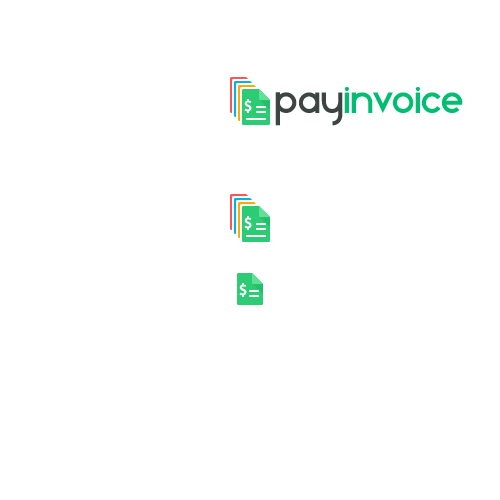
<style>
.page{position:relative;width:500px;height:500px;background:#ffffff}
.page>*{position:absolute;margin:0}
.t1{font:36px "StarAvenue";letter-spacing:0.025em;color:#00bd71}
.t2{font:36px "StarAvenue";letter-spacing:0.025em;color:#3d4543}
</style>
<div class="page">
<p class="t1" style="left:275px;top:87px;width:188px;height:39px"><span class="t2">pay</span>Invoice</p>
</div>
